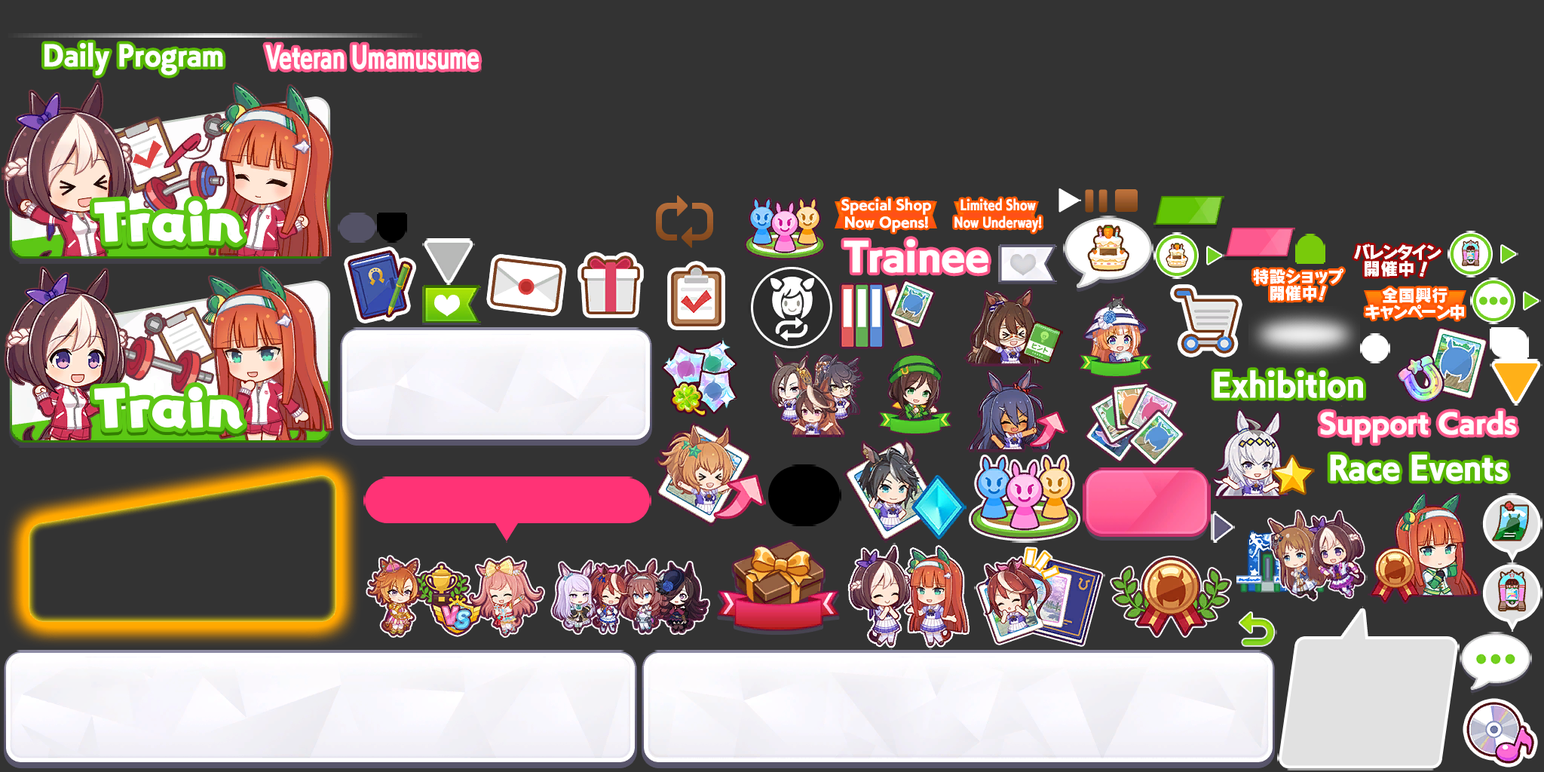
<style>
.page{position:relative;width:1544px;height:772px;background:#333333}
.page>*{position:absolute;margin:0}
.t1{font:26.1px "UMAE_UDKakugo_SmallPr6-E";letter-spacing:-0.005em;color:#ffffff;font-weight:bold;scale:0.92 1}
.t2{font:27.7px "UMAE_UDKakugo_SmallPr6-E";letter-spacing:-0.005em;color:#ffffff;font-weight:bold;scale:0.69 1}
.t3{font:12.9px/17px "UMAE_UDKakugo_SmallPr6-E";letter-spacing:-0.005em;color:#ffffff;font-weight:bold}
.t4{font:12.9px/17px "UMAE_UDKakugo_SmallPr6-E";letter-spacing:-0.005em;color:#ffffff;font-weight:bold;scale:0.82 1}
.t5{font:36.6px "UMAE_UDKakugo_SmallPr6-E";letter-spacing:-0.005em;color:#ffffff;font-weight:bold}
.t6{font:30.2px "UMAE_UDKakugo_SmallPr6-E";letter-spacing:-0.005em;color:#ffffff;font-weight:bold;scale:0.92 1}
.t7{font:25.6px "UMAE_UDKakugo_SmallPr6-E";letter-spacing:-0.005em;color:#ffffff;font-weight:bold}
</style>
<div class="page">
<p class="t1" style="left:44px;top:42px;width:179px;height:33px">Daily Program</p>
<p class="t2" style="left:265px;top:44px;width:215px;height:25px">Veteran Umamusume</p>
<p class="t3" style="left:842px;top:198px;width:89px;height:34px;text-align:center">Special Shop<br>Now Opens!</p>
<p class="t4" style="left:955px;top:198px;width:87px;height:34px;text-align:center">Limited Show<br>Now Underway!</p>
<p class="t5" style="left:844px;top:239px;width:145px;height:35px">Trainee</p>
<p class="t6" style="left:1214px;top:370px;width:149px;height:29px">Exhibition</p>
<p class="t7" style="left:1320px;top:411px;width:197px;height:32px">Support Cards</p>
<p class="t6" style="left:1330px;top:455px;width:178px;height:27px">Race Events</p>
</div>
